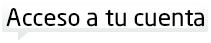
<style>
.page{position:relative;width:211px;height:43px;background:#ffffff}
.page>*{position:absolute;margin:0}
.t1{font:24px "NeoSans";color:#000000}
</style>
<div class="page">
<p class="t1" style="left:6px;top:8px;width:198px;height:19px">Acceso a tu cuenta</p>
</div>
